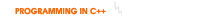
<style>
.page{position:relative;width:200px;height:20px;background:#ffffff}
.page>*{position:absolute;margin:0}
.t1{font:8px "Atlanta-Demi";color:#ff6600}
</style>
<div class="page">
<p class="t1" style="left:15px;top:7px;width:91px;height:8px">PROGRAMMING IN C++</p>
</div>
